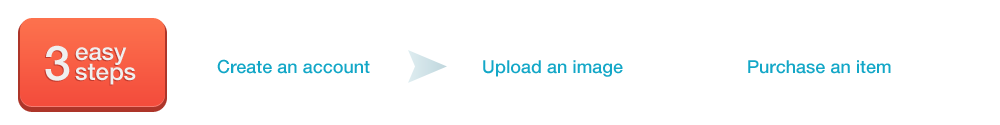
<style>
.page{position:relative;width:1000px;height:125px;background:#ffffff}
.page>*{position:absolute;margin:0}
.t1{font:48px "HelveticaNeueLTCom-Md";color:#efefef}
.t2{font:24px/20px "HelveticaNeueLTCom-Md";color:#efefef}
.t3{font:18px "HelveticaNeueLTCom-Md";color:#13a7c7}
</style>
<div class="page">
<p class="t1" style="left:45px;top:45px;width:25px;height:36px">3</p>
<p class="t2" style="left:75px;top:47px;width:61px;height:38px">easy<br>steps</p>
<p class="t3" style="left:217px;top:59px;width:153px;height:15px">Create an account</p>
<p class="t3" style="left:483px;top:60px;width:140px;height:17px">Upload an image</p>
<p class="t3" style="left:748px;top:60px;width:143px;height:14px">Purchase an item</p>
</div>
